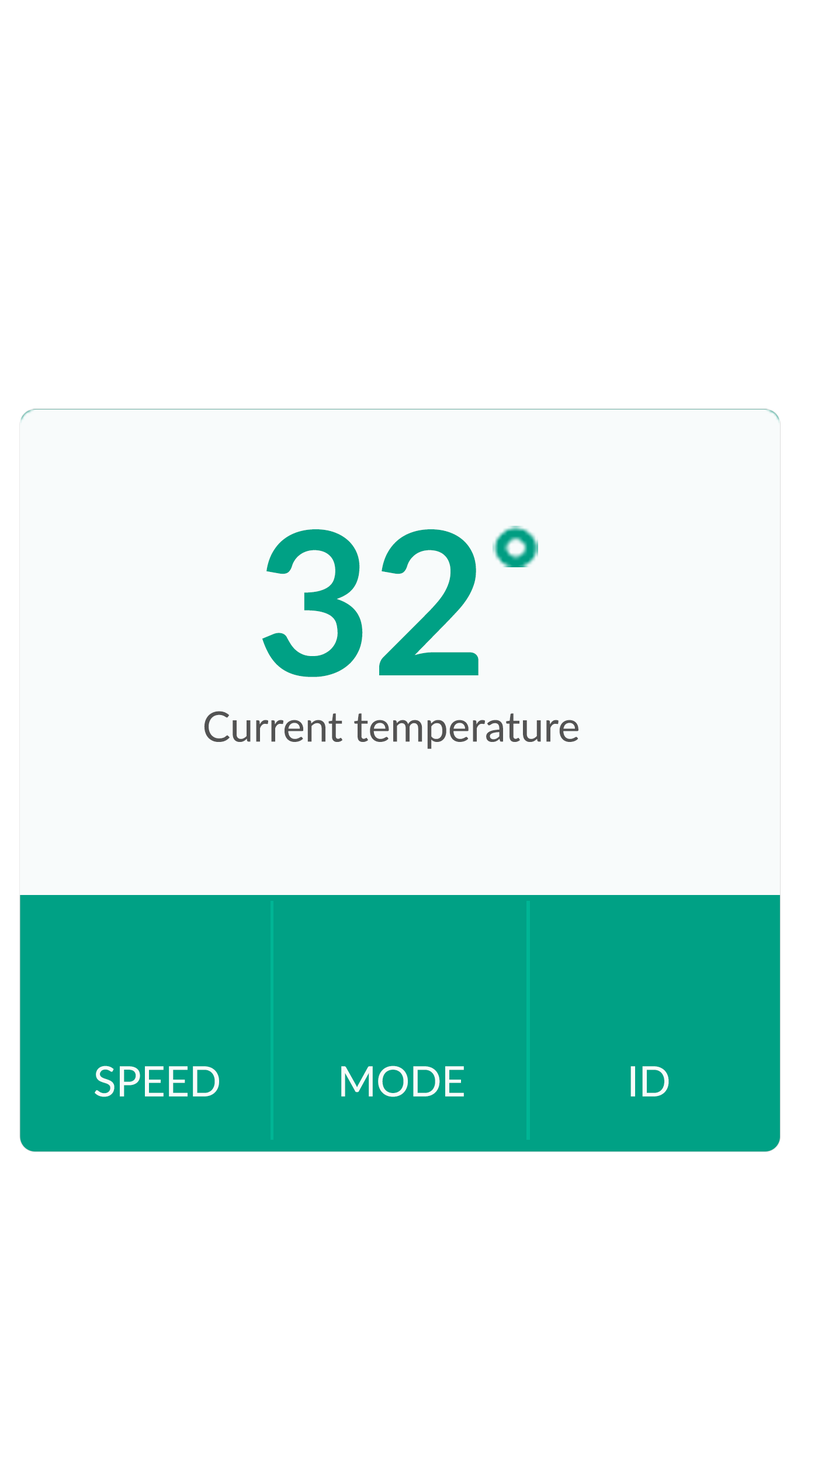
<style>
.page{position:relative;width:818px;height:1457px;background:#ffffff}
.page>*{position:absolute;margin:0}
.t1{font:199.8px "Lato-Bold";color:#00a185;text-transform:uppercase}
.t2{font:41.7px "Lato-Regular";color:#535353}
.t3{font:41.7px "Lato-Regular";color:#f7fbfa;text-transform:uppercase}
</style>
<div class="page">
<p class="t1" style="left:262px;top:529px;width:217px;height:148px">32</p>
<p class="t2" style="left:204px;top:711px;width:375px;height:38px">Current temperature</p>
<p class="t3" style="left:95px;top:1066px;width:124px;height:31px">speeD</p>
<p class="t3" style="left:341px;top:1066px;width:123px;height:31px">mode</p>
<p class="t3" style="left:631px;top:1067px;width:38px;height:30px">ID</p>
</div>
